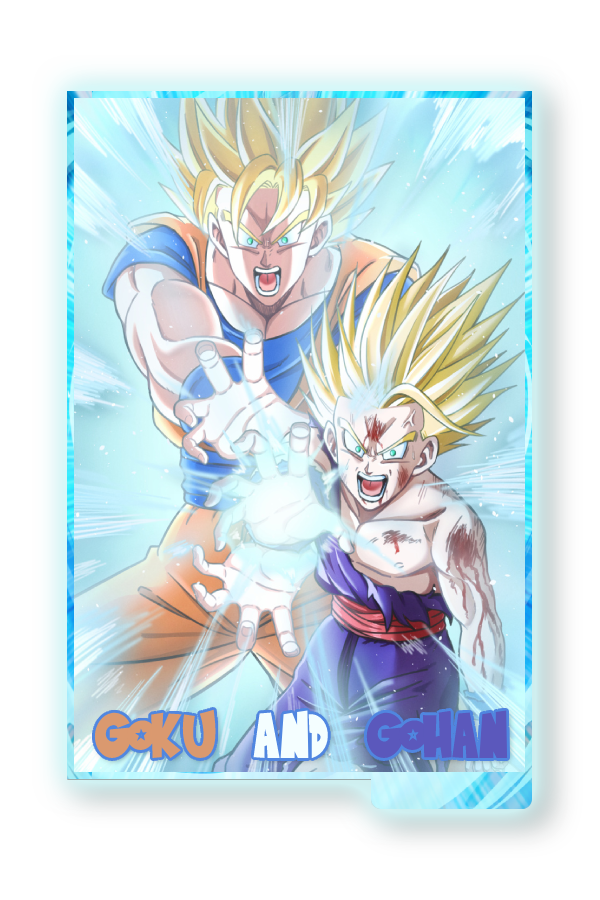
<style>
.page{position:relative;width:600px;height:900px;background:#ffffff}
.page>*{position:absolute;margin:0}
.t1{font:75px "SaiyanSans";color:#5b58bc}
.t2{font:75px "SaiyanSans";color:#da996f}
.t3{font:75px "SaiyanSans";color:#f4feff}
</style>
<div class="page">
<p class="t1" style="left:94px;top:709px;width:414px;height:50px"><span class="t2">goku </span><span class="t3">and </span>gohan</p>
</div>
